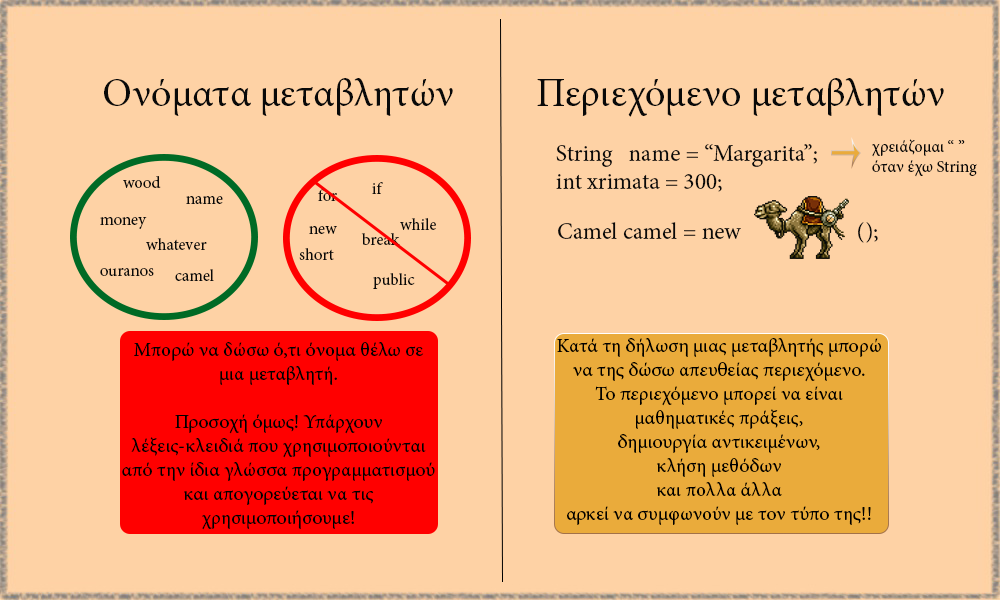
<style>
.page{position:relative;width:1000px;height:600px;background:#fed2a5}
.page>*{position:absolute;margin:0}
.t1{font:40px "MinionPro-Regular";color:#090909}
.t2{font:23.3px "MinionPro-Regular";color:#090909}
.t3{font:16.7px "MinionPro-Regular";color:#090909}
.t4{font:20px "MinionPro-Regular";color:#000000}
</style>
<div class="page">
<p class="t1" style="left:104px;top:78px;width:349px;height:38px">Ονόματα μεταβλητών</p>
<p class="t1" style="left:537px;top:78px;width:407px;height:39px">Περιεχόμενο μεταβλητών</p>
<p class="t2" style="left:556px;top:144px;width:261px;height:48px">String   name = “Margarita”;<br>int xrimata = 300;</p>
<p class="t3" style="left:872px;top:139px;width:105px;height:38px">χρειάζομαι “ ” όταν έχω String</p>
<p class="t3" style="left:123px;top:176px;width:38px;height:12px">wood</p>
<p class="t3" style="left:372px;top:182px;width:11px;height:12px">if</p>
<p class="t3" style="left:186px;top:196px;width:37px;height:8px">name</p>
<p class="t3" style="left:318px;top:189px;width:19px;height:12px">for</p>
<p class="t3" style="left:100px;top:217px;width:47px;height:12px">money</p>
<p class="t3" style="left:400px;top:218px;width:36px;height:12px">while</p>
<p class="t2" style="left:558px;top:222px;width:320px;height:21px">Camel camel = new                      ();</p>
<p class="t3" style="left:309px;top:226px;width:28px;height:8px">new</p>
<p class="t3" style="left:361px;top:233px;width:39px;height:12px">break</p>
<p class="t3" style="left:146px;top:238px;width:61px;height:12px">whatever</p>
<p class="t3" style="left:299px;top:248px;width:35px;height:12px">short</p>
<p class="t3" style="left:100px;top:268px;width:54px;height:8px">ouranos</p>
<p class="t3" style="left:175px;top:269px;width:39px;height:12px">camel</p>
<p class="t3" style="left:373px;top:273px;width:42px;height:16px">public</p>
<p class="t4" style="left:122px;top:342px;width:313px;height:188px;text-align:center">Μπορώ να δώσω ό,τι όνομα θέλω σε μια μεταβλητή.<br><br>Προσοχή όμως! Υπάρχουν λέξεις-κλειδιά που χρησιμοποιούνται από την ίδια γλώσσα προγραμματισμού και απογορεύεται να τις χρησιμοποιήσουμε!</p>
<p class="t4" style="left:557px;top:338px;width:324px;height:187px;text-align:center">Κατά τη δήλωση μιας μεταβλητής μπορώ να της δώσω απευθείας περιεχόμενο.<br>Το περιεχόμενο μπορεί να είναι μαθηματικές πράξεις, <br>δημιουργία αντικειμένων,<br>κλήση μεθόδων<br>και πολλα άλλα <br>αρκεί να συμφωνούν με τον τύπο της!!</p>
</div>
